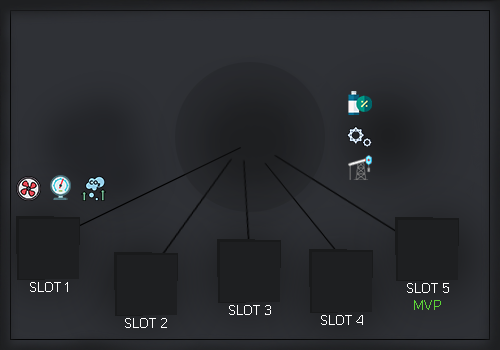
<style>
.page{position:relative;width:500px;height:350px}
.page>*{position:absolute;margin:0}
.t1{font:14.1px "UniSans-Light";color:#ffffff;text-transform:uppercase}
.t2{font:14.1px "UniSans-Light";color:#5dd339;text-transform:uppercase}
</style>
<div class="page">
<p class="t1" style="left:30px;top:282px;width:38px;height:10px">slot 1</p>
<p class="t1" style="left:407px;top:283px;width:42px;height:27px">SLOT 5<br>  <span class="t2">mvp</span></p>
<p class="t1" style="left:229px;top:305px;width:42px;height:10px">slot 3</p>
<p class="t1" style="left:125px;top:318px;width:42px;height:10px">SLOT 2</p>
<p class="t1" style="left:321px;top:315px;width:42px;height:10px">SLOT 4</p>
</div>
